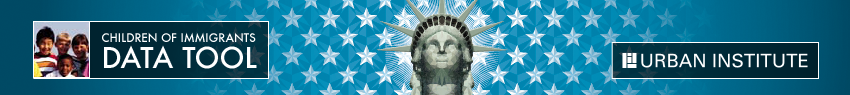
<style>
.page{position:relative;width:850px;height:95px}
.page>*{position:absolute;margin:0}
.t1{font:11.5px "Futura-Medium";color:#ffffff}
.t2{font:28.1px "Futura-Medium";color:#ffffff}
</style>
<div class="page">
<p class="t1" style="left:102px;top:32px;width:154px;height:10px">CHILDREN OF IMMIGRANTS</p>
<p class="t2" style="left:104px;top:45px;width:153px;height:24px">DATA TOOL</p>
</div>
